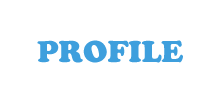
<style>
.page{position:relative;width:220px;height:100px;background:#ffffff}
.page>*{position:absolute;margin:0}
.t1{font:30px "CooperBlackStd";color:#3e9fdd}
</style>
<div class="page">
<p class="t1" style="left:37px;top:40px;width:146px;height:23px">PROFILE</p>
</div>
